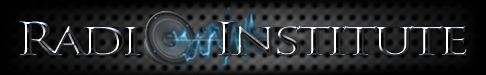
<style>
.page{position:relative;width:486px;height:75px}
.page>*{position:absolute;margin:0}
.t1{font:44px "TrajanPro-Bold";letter-spacing:-0.1em;scale:1.25 1}
.t2{font:44px "TrajanPro-Bold";letter-spacing:-0.02em;scale:1.25 1}
</style>
<div class="page">
<p class="t1" style="left:19px;top:21px;width:448px;height:35px">Radi       Institut<span class="t2">e</span></p>
</div>
